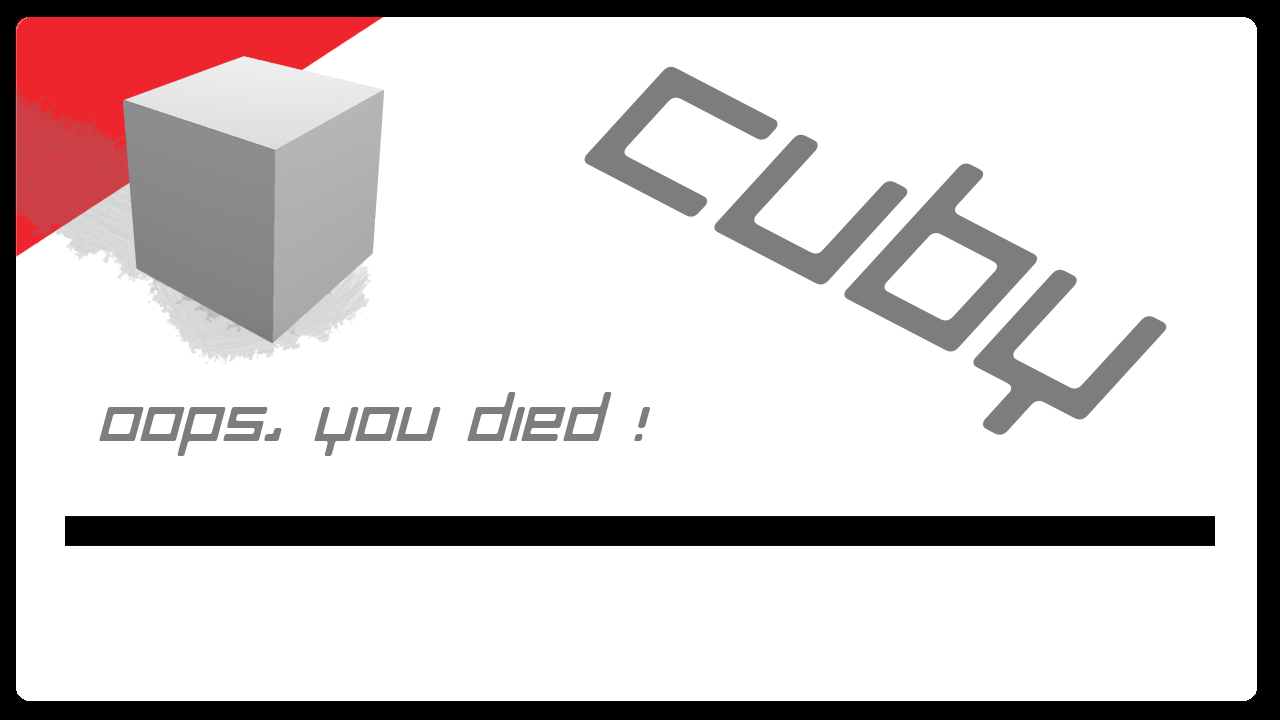
<style>
.page{position:relative;width:1280px;height:720px;background:#ffffff}
.page>*{position:absolute;margin:0}
.t1{font:226.6px "LuggageRoundRegularOblique";color:#7d7d7d}
.t2{font:64px "LuggageRoundRegularOblique";color:#7d7d7d}
</style>
<div class="page">
<p class="t1" style="left:584px;top:66px;width:583px;height:369px;rotate:27deg">Cuby</p>
<p class="t2" style="left:99px;top:392px;width:551px;height:64px">Oops, you died !</p>
</div>
